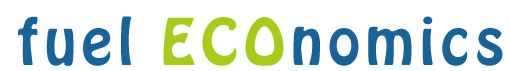
<style>
.page{position:relative;width:510px;height:71px;background:#ffffff}
.page>*{position:absolute;margin:0}
.t1{font:56.7px "HoboStd";letter-spacing:0.1em;color:#17649a}
.t2{font:56.7px "HoboStd";letter-spacing:0.1em;color:#a8cb17}
</style>
<div class="page">
<p class="t1" style="left:18px;top:16px;width:485px;height:50px">fuel <span class="t2">ECO</span>nomics</p>
</div>
